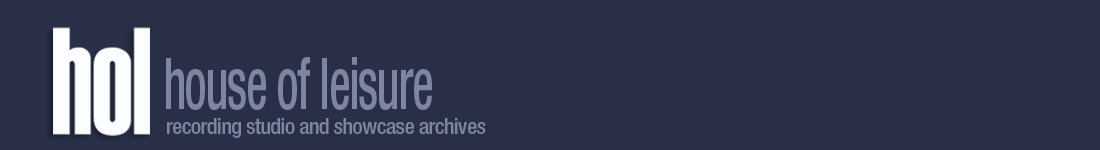
<style>
.page{position:relative;width:1100px;height:150px;background:#292f47}
.page>*{position:absolute;margin:0}
.t1{font:72px "HelveticaNeue-MediumCond";letter-spacing:-0.025em;color:#7d85a3;scale:0.65 1}
.t2{font:22px "HelveticaNeue-MediumCond";letter-spacing:-0.025em;color:#7d85a3}
</style>
<div class="page">
<p class="t1" style="left:166px;top:57px;width:266px;height:53px">house of leisure</p>
<p class="t2" style="left:167px;top:118px;width:319px;height:20px">recording studio and showcase archives</p>
</div>
